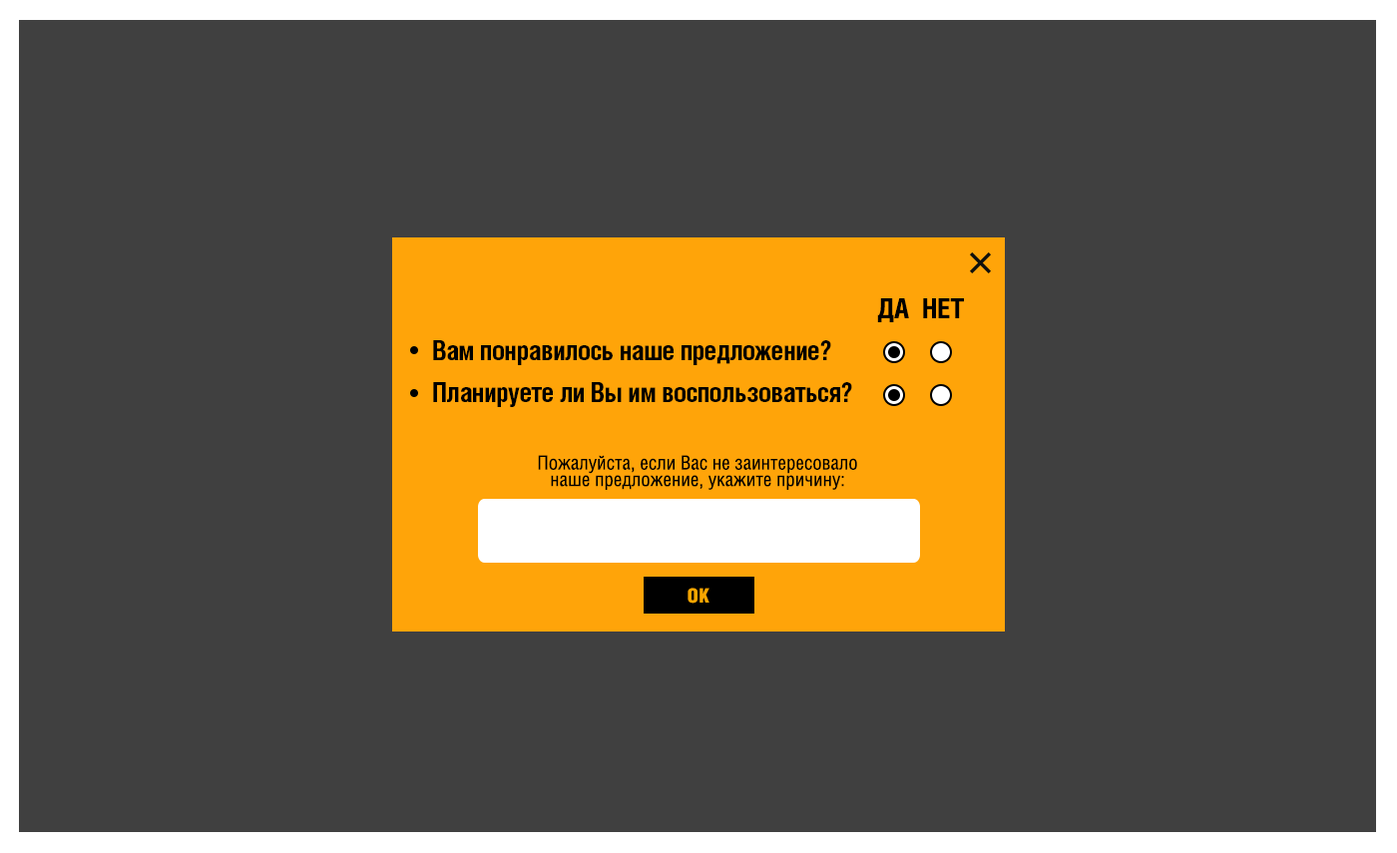
<style>
.page{position:relative;width:1397px;height:853px;background:#404040}
.page>*{position:absolute;margin:0}
.t1{font:27.4px "HeliosCond-Bold";color:#000000;text-transform:uppercase}
.t2{font:27.4px/41.6px "HeliosCond-Bold";letter-spacing:-0.025em;color:#000000}
.t3{font:19.4px/16.6px "HeliosCond";color:#000000}
.t4{font:20px "HeliosCondBlack";letter-spacing:0.025em;color:#f7a600;text-transform:uppercase}
</style>
<div class="page">
<p class="t1" style="left:877px;top:298px;width:87px;height:24px">да  нет</p>
<p class="t2" style="left:433px;top:340px;width:419px;height:67px">Вам понравилось наше предложение?<br>Планируете ли Вы им воспользоваться?</p>
<p class="t3" style="left:538px;top:455px;width:319px;height:35px;text-align:center">Пожалуйста, если Вас не заинтересовало<br>наше предложение, укажите причину:</p>
<p class="t4" style="left:688px;top:588px;width:22px;height:16px">ОК</p>
</div>
